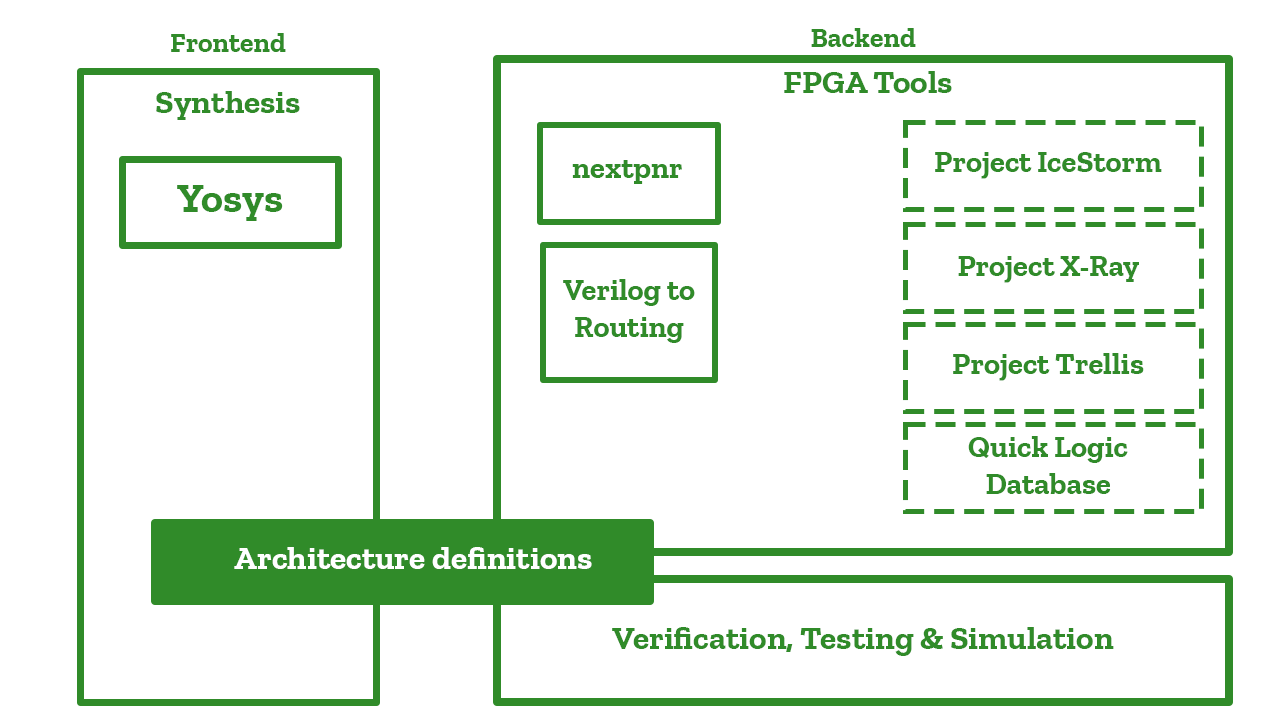
<style>
.page{position:relative;width:1280px;height:724px;background:#ffffff}
.page>*{position:absolute;margin:0}
.t1{font:27.8px "ZillaSlab-Bold";color:#308b29}
.t2{font:33.3px "ZillaSlab-Bold";color:#308b29}
.t3{font:30.5px "ZillaSlab-Bold";color:#308b29}
.t4{font:41.7px "ZillaSlab-Bold";color:#308b29}
.t5{font:30.6px "ZillaSlab-Bold";color:#308b29}
.t6{font:33.3px "ZillaSlab-Bold";color:#ffffff}
</style>
<div class="page">
<p class="t1" style="left:811px;top:28px;width:105px;height:19px">Backend</p>
<p class="t1" style="left:171px;top:33px;width:115px;height:19px">Frontend</p>
<p class="t2" style="left:784px;top:71px;width:168px;height:22px">FPGA Tools</p>
<p class="t2" style="left:156px;top:91px;width:144px;height:29px">Synthesis</p>
<p class="t3" style="left:572px;top:160px;width:110px;height:24px">nextpnr</p>
<p class="t3" style="left:935px;top:152px;width:227px;height:27px">Project IceStorm</p>
<p class="t4" style="left:177px;top:185px;width:106px;height:36px">Yosys</p>
<p class="t3" style="left:958px;top:256px;width:181px;height:27px">Project X-Ray</p>
<p class="t5" style="left:563px;top:279px;width:132px;height:64px;text-align:center">Verilog to Routing</p>
<p class="t3" style="left:953px;top:353px;width:191px;height:28px">Project Trellis</p>
<p class="t3" style="left:968px;top:436px;width:160px;height:58px;text-align:center">Quick Logic <br>Database</p>
<p class="t6" style="left:234px;top:547px;width:358px;height:22px">Architecture definitions</p>
<p class="t2" style="left:612px;top:627px;width:502px;height:29px">Verification, Testing &amp; Simulation</p>
</div>
